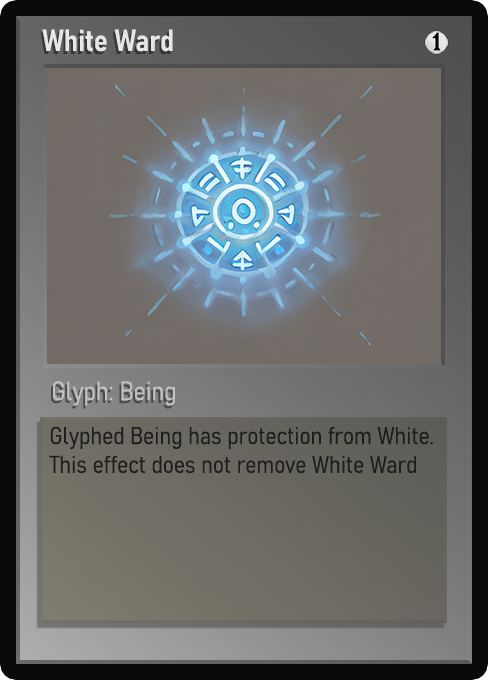
<style>
.page{position:relative;width:488px;height:680px}
.page>*{position:absolute;margin:0}
.t1{font:30px "Bahnschrift-SemiBoldSemiCondensed";color:#f2f2f2;font-weight:bold}
.t2{font:25px "WTRRoycroft";color:#000000;font-weight:bold;scale:1.09 1}
.t3{font:26px "Bahnschrift-LightSemiCondensed";color:#c8c8c8;font-weight:bold}
.t4{font:24px "Bahnschrift-LightSemiCondensed";color:#1e1e1e;font-weight:bold}
</style>
<div class="page">
<p class="t1" style="left:42px;top:29px;width:131px;height:23px;opacity:0.9">White Ward</p>
<p class="t2" style="left:432px;top:32px;width:9px;height:19px">1</p>
<p class="t3" style="left:53px;top:381px;width:122px;height:25px;opacity:0.9">Glyph: Being</p>
<p class="t4" style="left:49px;top:426px;width:384px;height:48px">Glyphed Being has protection from White. This effect does not remove White Ward</p>
</div>
